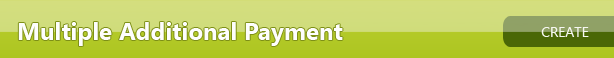
<style>
.page{position:relative;width:614px;height:58px}
.page>*{position:absolute;margin:0}
.t1{font:24px "SegoeUI-Bold";color:#fefefe}
.t2{font:14px "SegoeUI";color:#f6f7f1}
</style>
<div class="page">
<p class="t1" style="left:18px;top:22px;width:325px;height:24px">Multiple Additional Payment</p>
<p class="t2" style="left:541px;top:27px;width:48px;height:10px">CREATE</p>
</div>
